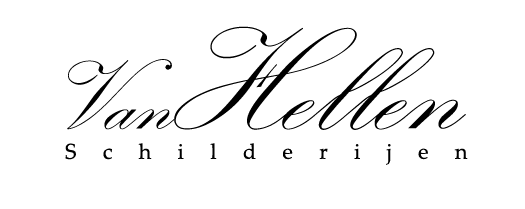
<style>
.page{position:relative;width:525px;height:209px;background:#ffffff}
.page>*{position:absolute;margin:0}
.t1{font:150px "KunstlerScript";color:#000000}
.t2{font:100px "KunstlerScript";color:#000000}
.t3{font:21.4px "PalatinoLinotype-Roman";letter-spacing:1.22em;color:#000000}
</style>
<div class="page">
<p class="t1" style="left:174px;top:26px;width:292px;height:104px">Hellen</p>
<p class="t2" style="left:67px;top:59px;width:108px;height:71px">Van</p>
<p class="t3" style="left:65px;top:143px;width:403px;height:22px">Schilderijen</p>
</div>
